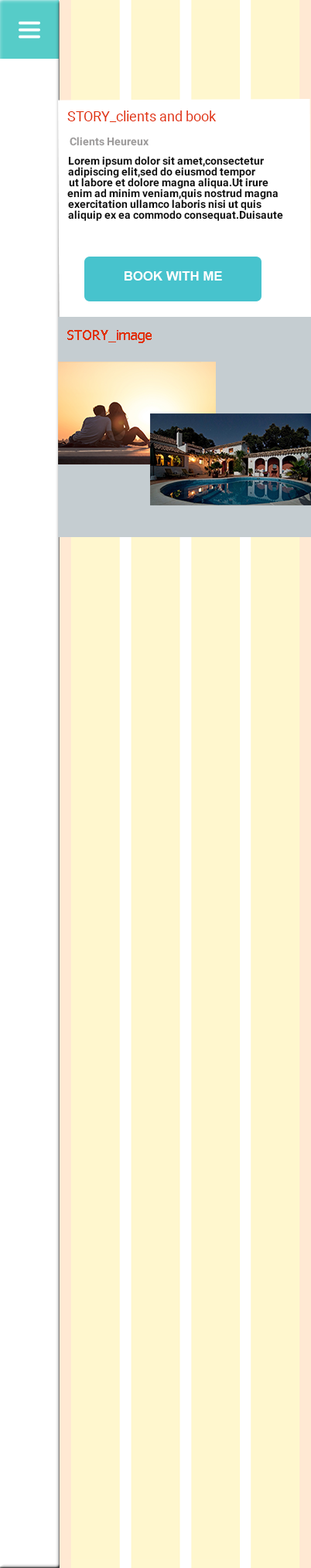
<style>
.page{position:relative;width:311px;height:1568px;background:#fff7ce}
.page>*{position:absolute;margin:0}
.t1{font:13.9px "Roboto-Regular";color:#e1310c}
.t2{font:10.8px "Roboto-Bold";color:#9d9b9b}
.t3{font:10.8px "Roboto-Bold";color:#090909}
.t4{font:12.5px "Arial-BoldMT";color:#ffffff;scale:1.04 1}
.t5{font:13.9px "Tahoma";color:#e1310c}
</style>
<div class="page">
<p class="t1" style="left:67px;top:111px;width:149px;height:11px">STORY_clients and book</p>
<p class="t2" style="left:70px;top:137px;width:78px;height:9px">Clients Heureux</p>
<p class="t3" style="left:68px;top:156px;width:196px;height:11px">Lorem ipsum dolor sit amet,consectetur</p>
<p class="t3" style="left:68px;top:167px;width:188px;height:11px">adipiscing elit,sed do eiusmod tempor</p>
<p class="t3" style="left:69px;top:178px;width:199px;height:11px">ut labore et dolore magna aliqua.Ut irure</p>
<p class="t3" style="left:67px;top:189px;width:210px;height:10px">enim ad minim veniam,quis nostrud magna</p>
<p class="t3" style="left:68px;top:199px;width:193px;height:11px">exercitation ullamco laboris nisi ut quis</p>
<p class="t3" style="left:68px;top:210px;width:215px;height:11px">aliquip ex ea commodo consequat.Duisaute</p>
<p class="t4" style="left:124px;top:271px;width:98px;height:10px">BOOK WITH ME</p>
<p class="t5" style="left:67px;top:330px;width:84px;height:13px">STORY_image</p>
</div>
